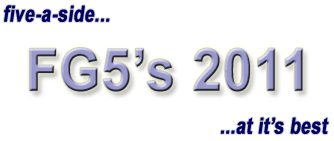
<style>
.page{position:relative;width:334px;height:141px;background:#ffffff}
.page>*{position:absolute;margin:0}
.t1{font:22.3px "Arial-BoldMT";color:#000066;font-weight:bold;font-style:italic;scale:0.78 1}
.t2{font:57.8px "Arial-BoldMT";font-weight:bold;scale:0.91 1}
</style>
<div class="page">
<p class="t1" style="left:4px;top:5px;width:106px;height:17px">five-a-side...</p>
<p class="t2" style="left:29px;top:48px;width:274px;height:44px">FG5’s 2011</p>
<p class="t1" style="left:220px;top:117px;width:109px;height:17px">...at it’s best</p>
</div>
